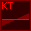
<style>
.page{position:relative;width:31px;height:31px;background:#320000}
.page>*{position:absolute;margin:0}
.t1{font:15px "ProggyTinyTT";color:#ff0000}
</style>
<div class="page">
<p class="t1" style="left:2px;top:2px;width:11px;height:7px">KT</p>
</div>
